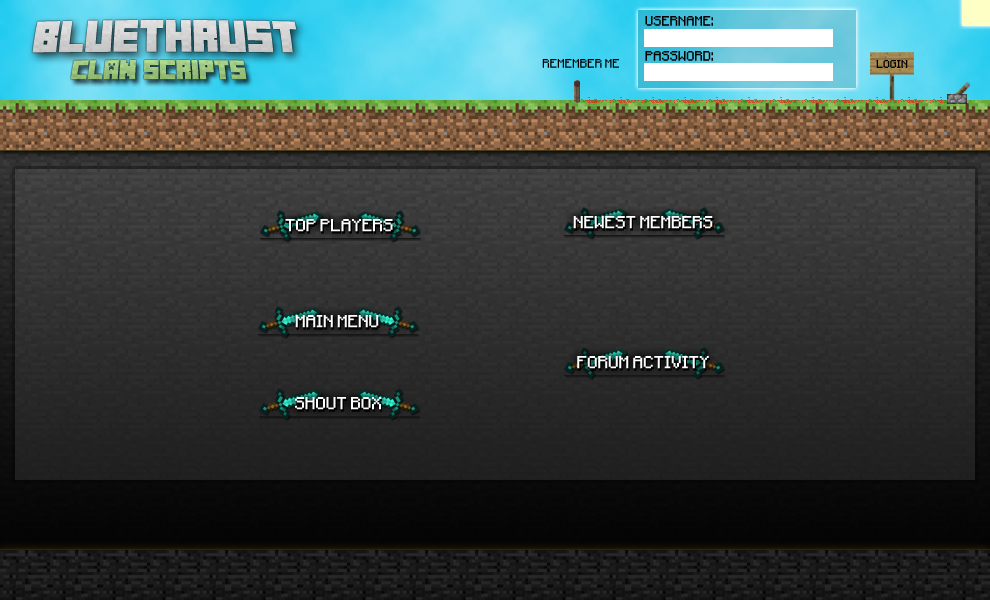
<style>
.page{position:relative;width:990px;height:600px}
.page>*{position:absolute;margin:0}
.t1{font:11px "Minecraft";color:#000000}
.t2{font:30px "MineCrafter-3";color:#d2d2d2}
.t3{font:18px "MineCrafter-3";color:#9dc57e}
.t4{font:10px "Minecraft";color:#000000}
.t5{font:9px "Minecraft";color:#000000}
.t6{font:14px "Minecraft";color:#ffffff}
</style>
<div class="page">
<p class="t1" style="left:645px;top:16px;width:68px;height:10px">USERNAME:</p>
<p class="t2" style="left:32px;top:20px;width:265px;height:33px">BLUETHRUST</p>
<p class="t1" style="left:645px;top:51px;width:68px;height:10px">PASSWORD:</p>
<p class="t3" style="left:70px;top:60px;width:177px;height:20px">CLAN SCRIPTS</p>
<p class="t4" style="left:542px;top:59px;width:77px;height:9px">REMEMBER ME</p>
<p class="t5" style="left:876px;top:60px;width:32px;height:8px">LOGIN</p>
<p class="t6" style="left:285px;top:219px;width:108px;height:13px">TOP PLAYERS</p>
<p class="t6" style="left:573px;top:216px;width:140px;height:13px">NEWEST MEMBERS</p>
<p class="t6" style="left:295px;top:315px;width:84px;height:13px">MAIN MENU</p>
<p class="t6" style="left:577px;top:356px;width:132px;height:13px">FORUM ACTIVITY</p>
<p class="t6" style="left:295px;top:397px;width:86px;height:13px">SHOUT BOX</p>
</div>
